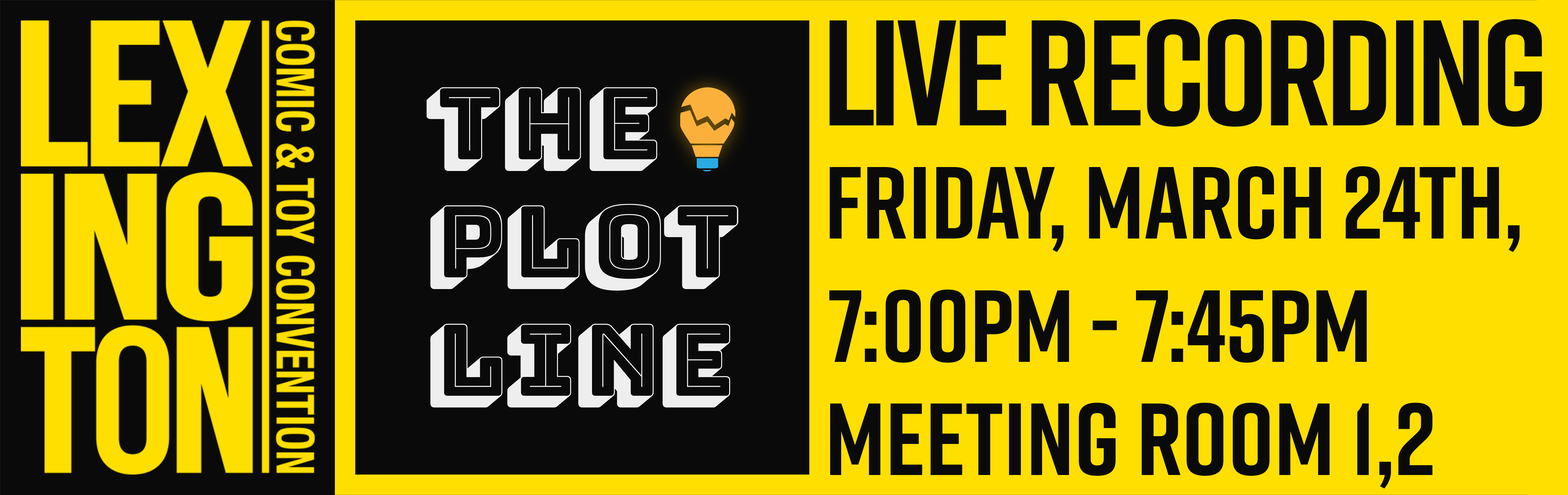
<style>
.page{position:relative;width:1568px;height:495px;background:#0a0a0a}
.page>*{position:absolute;margin:0}
.t1{font:149.7px "Rift-Bold";letter-spacing:-0.035em;color:#0a0a0a}
.t2{font:149.7px "Rift-Bold";letter-spacing:-0.05em;color:#0a0a0a}
.t3{font:102.1px "Rift-Bold";color:#0a0a0a}
</style>
<div class="page">
<p class="t1" style="left:829px;top:19px;width:713px;height:108px"><span class="t2">L</span>IVE Recording</p>
<p class="t3" style="left:830px;top:166px;width:690px;height:86px">Friday, March 24th,</p>
<p class="t3" style="left:829px;top:290px;width:538px;height:73px">7:00pm - 7:45pm</p>
<p class="t3" style="left:830px;top:403px;width:602px;height:85px">Meeting Room 1,2</p>
</div>
